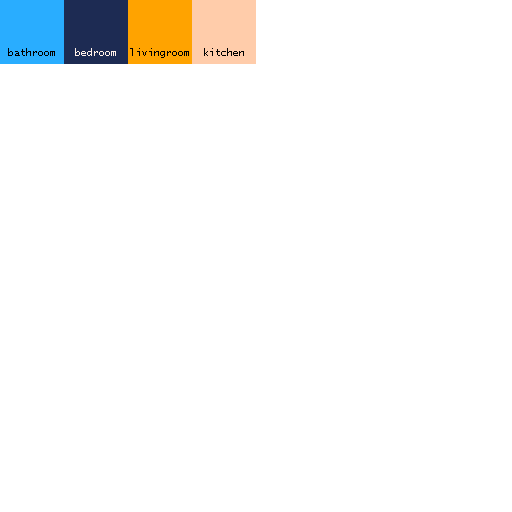
<style>
.page{position:relative;width:512px;height:512px;background:#ffffff}
.page>*{position:absolute;margin:0}
.t1{font:10px "LucidaConsole";color:#000000}
.t2{font:10px "LucidaConsole";color:#fff1e8}
</style>
<div class="page">
<p class="t1" style="left:8px;top:48px;width:47px;height:8px">bathroom</p>
<p class="t2" style="left:75px;top:48px;width:41px;height:8px">bedroom</p>
<p class="t1" style="left:130px;top:48px;width:59px;height:10px">livingroom</p>
<p class="t1" style="left:204px;top:48px;width:40px;height:8px">kitchen</p>
</div>
